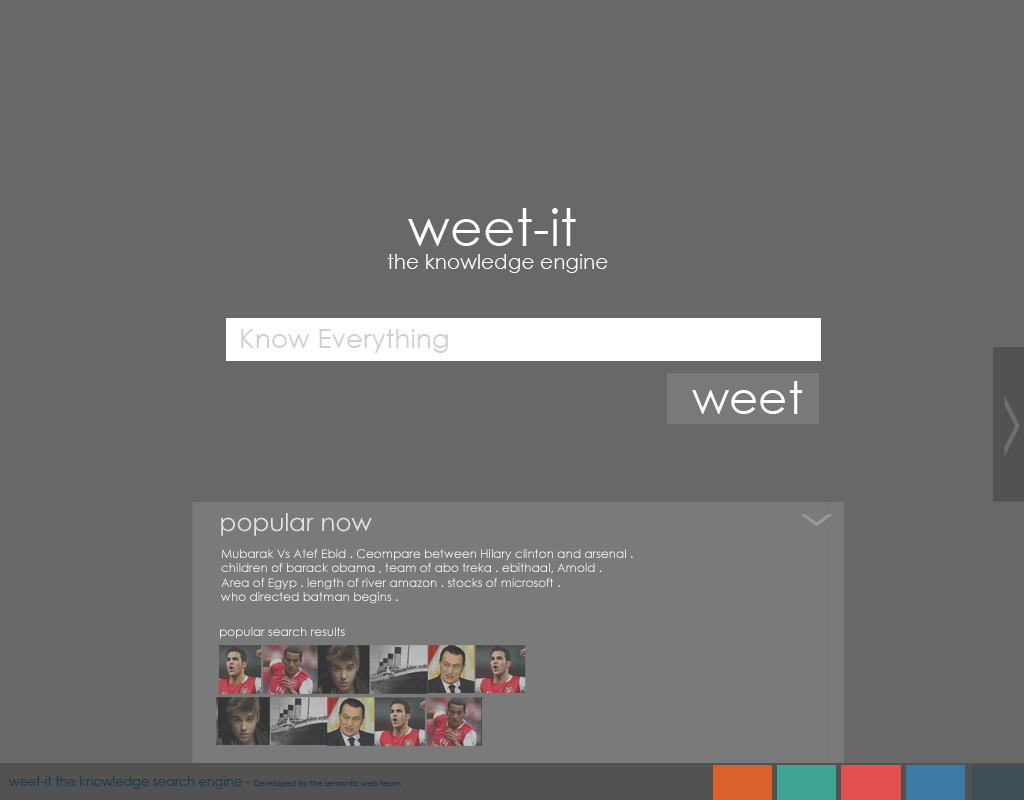
<style>
.page{position:relative;width:1024px;height:800px;background:#686868}
.page>*{position:absolute;margin:0}
.t1{font:51.4px "CenturyGothic";color:#ffffff}
.t2{font:20.1px "CenturyGothic";color:#ffffff}
.t3{font:26.4px "CenturyGothic";color:#d0d0d0}
.t4{font:44.7px "CenturyGothic";color:#ffffff}
.t5{font:27.7px "CenturyGothic";color:#6f6f6f;scale:4.31 1}
.t6{font:24.6px "CenturyGothic";color:#e2e2e2}
.t7{font:21.5px "CenturyGothic";color:#999999;scale:3 1}
.t8{font:12px "CenturyGothic";color:#ffffff}
.t9{font:13.1px "CenturyGothic";color:#2a4958}
.t10{font:7.9px "CenturyGothic";color:#2a4958}
</style>
<div class="page">
<p class="t1" style="left:408px;top:208px;width:168px;height:38px">weet-it</p>
<p class="t2" style="left:387px;top:254px;width:221px;height:19px">the knowledge engine</p>
<p class="t3" style="left:241px;top:329px;width:207px;height:24px">Know Everything</p>
<p class="t4" style="left:692px;top:381px;width:111px;height:33px">weet</p>
<p class="t5" style="left:1004px;top:396px;width:16px;height:60px;rotate:-90deg">v</p>
<p class="t6" style="left:221px;top:513px;width:151px;height:23px">popular now</p>
<p class="t7" style="left:800px;top:514px;width:33px;height:12px">v</p>
<p class="t8" style="left:221px;top:549px;width:412px;height:55px">Mubarak Vs Atef Ebid . Ceompare between Hilary clinton and arsenal . <br>children of barack obama , team of abo treka . ebithaal, Arnold . <br>Area of Egyp . length of river amazon . stocks of microsoft .<br>who directed batman begins .</p>
<p class="t8" style="left:220px;top:627px;width:125px;height:12px">popular search results</p>
<p class="t9" style="left:8px;top:776px;width:393px;height:13px">weet-it the knowledge search engine - <span class="t10">Developed by the semantic web team</span></p>
</div>
